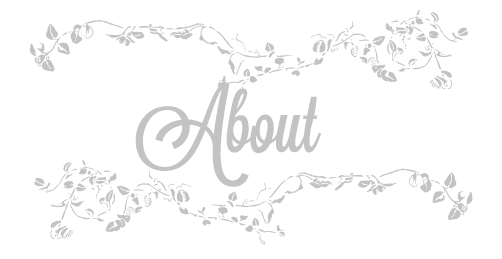
<style>
.page{position:relative;width:502px;height:259px;background:#ffffff}
.page>*{position:absolute;margin:0}
.t1{font:80px "Lavanderia-Sturdy";letter-spacing:-0.01em;color:#c3c3c3}
</style>
<div class="page">
<p class="t1" style="left:135px;top:81px;width:186px;height:106px">About</p>
</div>
